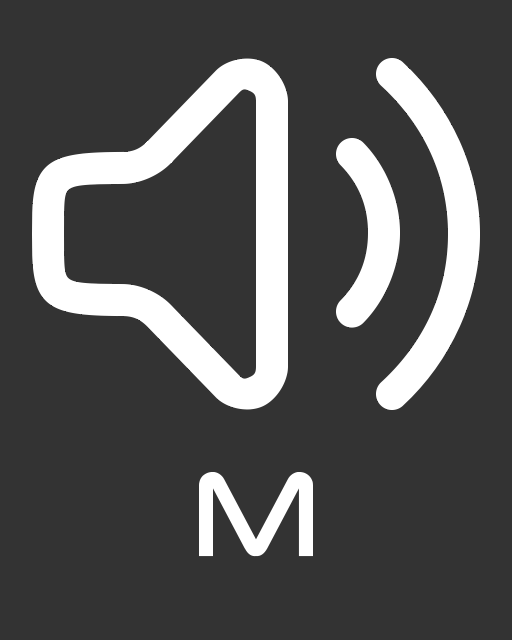
<style>
.page{position:relative;width:512px;height:640px;background:#333333}
.page>*{position:absolute;margin:0}
.t1{font:200px "ISL_Jupiter";letter-spacing:0.1em;color:#ffffff}
</style>
<div class="page">
<p class="t1" style="left:199px;top:472px;width:114px;height:85px">M</p>
</div>
